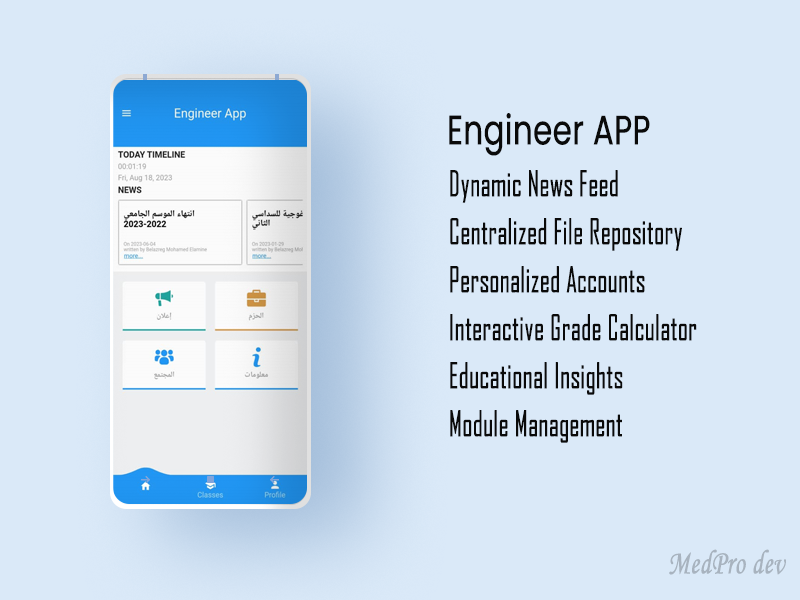
<style>
.page{position:relative;width:800px;height:600px;background:#dae9f8}
.page>*{position:absolute;margin:0}
.t1{font:40.8px "Poppins-Regular";letter-spacing:-0.01em;color:#0a0a0a;font-weight:bold;scale:0.75 1}
.t2{font:34px "AgencyFB-Reg";color:#0a0a0a;font-weight:bold;scale:0.75 1}
.t3{font:34px "MonotypeCorsiva";color:#a8b3bf;font-weight:bold;scale:0.75 1}
</style>
<div class="page">
<p class="t1" style="left:449px;top:113px;width:201px;height:43px">Engineer APP</p>
<p class="t2" style="left:450px;top:170px;width:247px;height:273px;text-align:right">Dynamic News Feed<br>Centralized File Repository<br>Personalized Accounts<br>Interactive Grade Calculator<br>Educational Insights<br>Module Management</p>
<p class="t3" style="left:669px;top:549px;width:117px;height:26px">MedPro dev</p>
</div>
